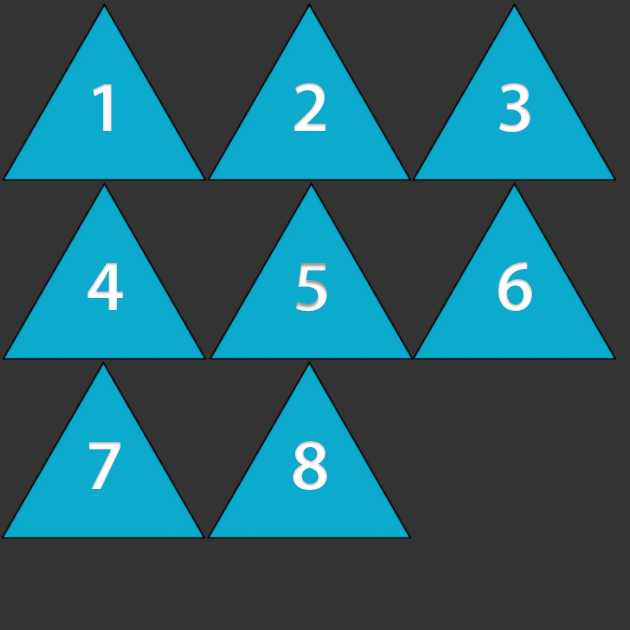
<style>
.page{position:relative;width:630px;height:630px;background:#333333}
.page>*{position:absolute;margin:0}
.t1{font:72px "MyriadPro-Semibold";color:#ffffff}
.t2{font:72px "MyriadPro-Semibold"}
</style>
<div class="page">
<p class="t1" style="left:92px;top:84px;width:20px;height:47px">1</p>
<p class="t1" style="left:294px;top:83px;width:32px;height:48px">2</p>
<p class="t1" style="left:499px;top:83px;width:32px;height:49px">3</p>
<p class="t1" style="left:87px;top:263px;width:36px;height:47px">4</p>
<p class="t2" style="left:295px;top:263px;width:32px;height:48px">5</p>
<p class="t1" style="left:498px;top:262px;width:34px;height:49px">6</p>
<p class="t1" style="left:89px;top:442px;width:32px;height:47px">7</p>
<p class="t1" style="left:293px;top:441px;width:34px;height:49px">8</p>
</div>
